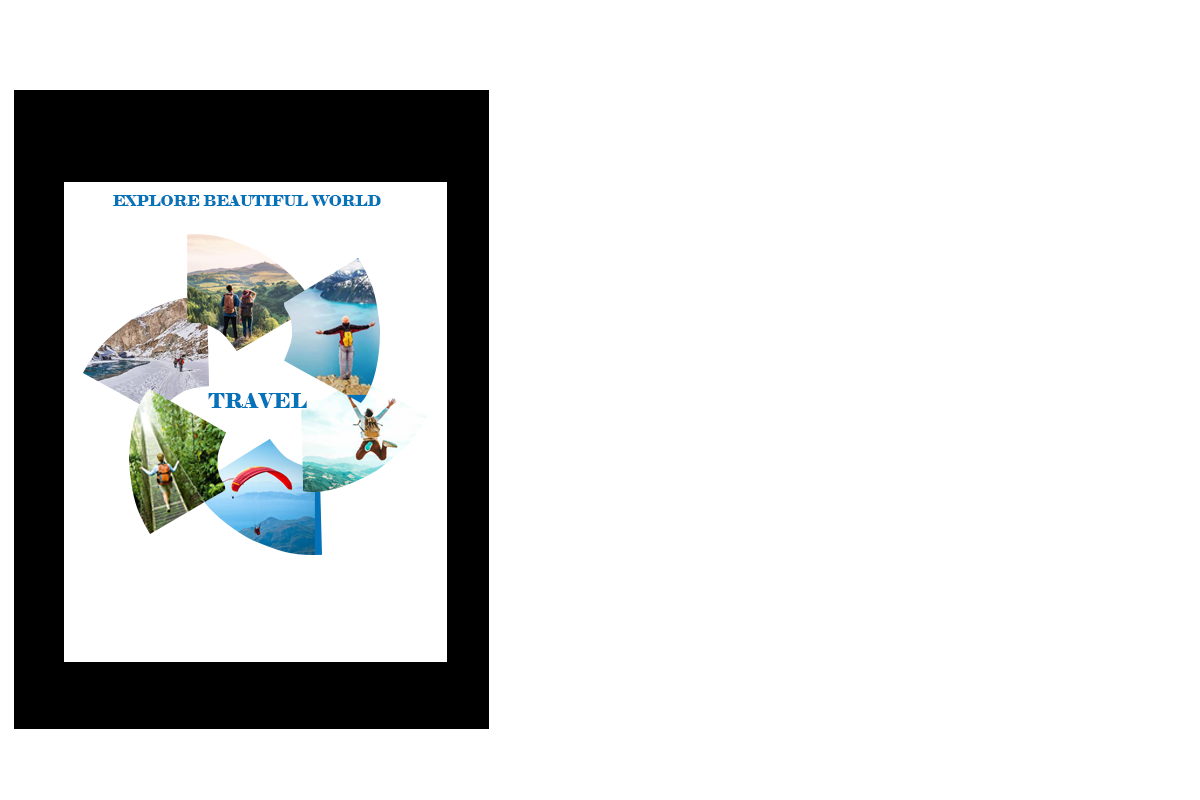
<style>
.page{position:relative;width:1200px;height:800px;background:#ffffff}
.page>*{position:absolute;margin:0}
.t1{font:14.6px "Elephant-Regular";color:#0473ba}
.t2{font:20.2px "Elephant-Regular";color:#0473ba}
</style>
<div class="page">
<p class="t1" style="left:113px;top:195px;width:268px;height:11px">EXPLORE BEAUTIFUL WORLD</p>
<p class="t2" style="left:208px;top:393px;width:99px;height:15px">TRAVEL</p>
</div>
